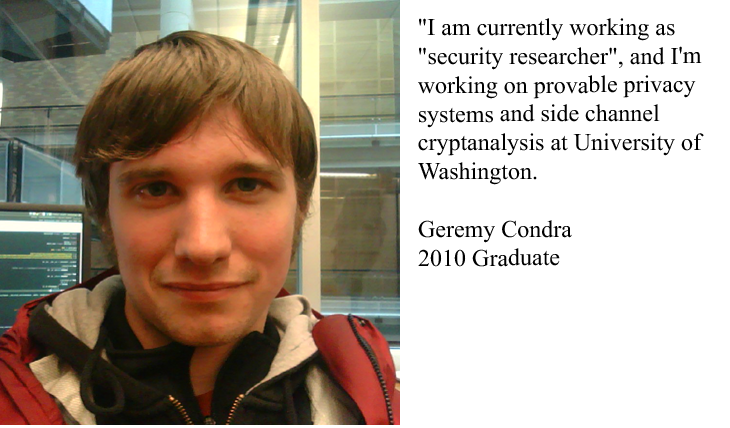
<style>
.page{position:relative;width:730px;height:428px;background:#ffffff}
.page>*{position:absolute;margin:0}
.t1{font:24px "TimesNewRomanPSMT";color:#000000}
</style>
<div class="page">
<p class="t1" style="left:418px;top:18px;width:286px;height:249px">"I am currently working as "security researcher", and I'm working on provable privacy<br>systems and side channel cryptanalysis at University of Washington.<br><br>Geremy Condra<br>2010 Graduate</p>
</div>
